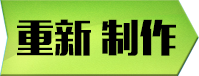
<style>
.page{position:relative;width:199px;height:76px}
.page>*{position:absolute;margin:0}
.t1{font:38px "MFLiHei_Noncommercial-Regular";color:#000000}
</style>
<div class="page">
<p class="t1" style="left:17px;top:19px;width:159px;height:37px">重新 制作</p>
</div>
